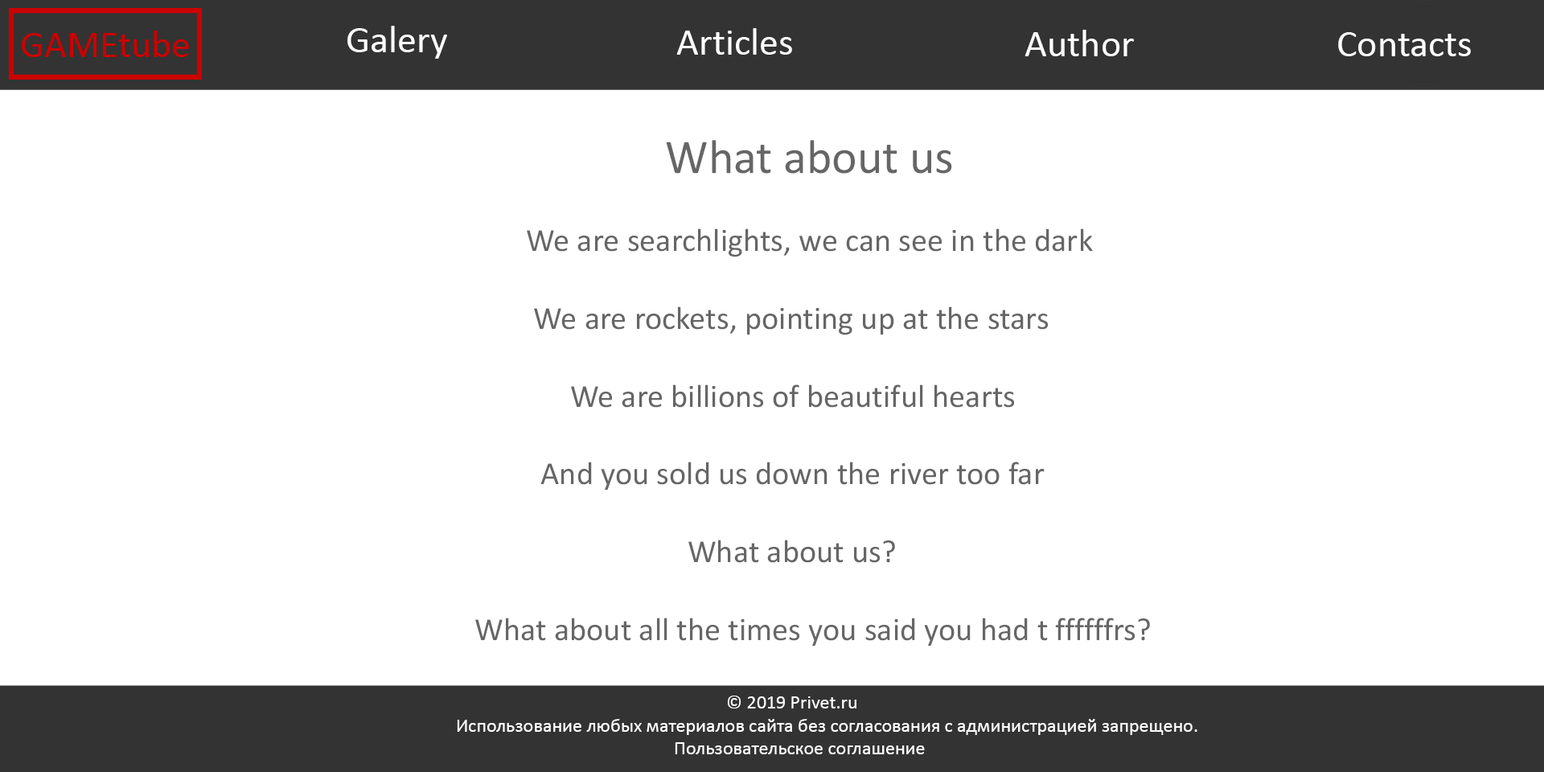
<style>
.page{position:relative;width:1544px;height:772px;background:#ffffff}
.page>*{position:absolute;margin:0}
.t1{font:32.5px "Calibri";color:#666666}
.t2{font:48.3px "Calibri";color:#666666}
.t3{font:19.3px "Calibri";color:#ffffff}
</style>
<div class="page">
<p class="t1" style="left:475px;top:140px;width:675px;height:507px"><span class="t2">What about us<br></span><br>       We are searchlights, we can see in the dark<br><br>        We are rockets, pointing up at the stars<br><br>             We are billions of beautiful hearts<br><br>         And you sold us down the river too far<br><br>                             What about us?<br><br>What about all the times you said you had t ffffffrs?</p>
<p class="t3" style="left:457px;top:696px;width:741px;height:58px">© 2019 Privet.ru<br>Использование любых материалов сайта без согласования с администрацией запрещено.<br>                                                  Пользовательское соглашение</p>
</div>
